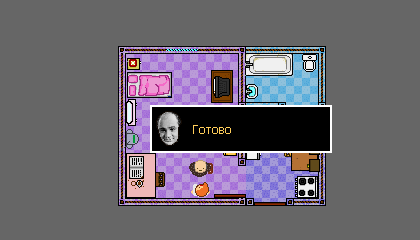
<style>
.page{position:relative;width:420px;height:240px;background:#666666}
.page>*{position:absolute;margin:0}
.t1{font:12px "Tahoma";color:#ffcd59}
</style>
<div class="page">
<p class="t1" style="left:193px;top:125px;width:38px;height:9px">Готово</p>
</div>
